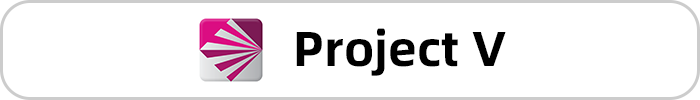
<style>
.page{position:relative;width:700px;height:100px;background:#ffffff}
.page>*{position:absolute;margin:0}
.t1{font:49.1px "Alibaba-PuHuiTi-B";color:#000000}
</style>
<div class="page">
<p class="t1" style="left:296px;top:28px;width:210px;height:48px">Project V</p>
</div>
